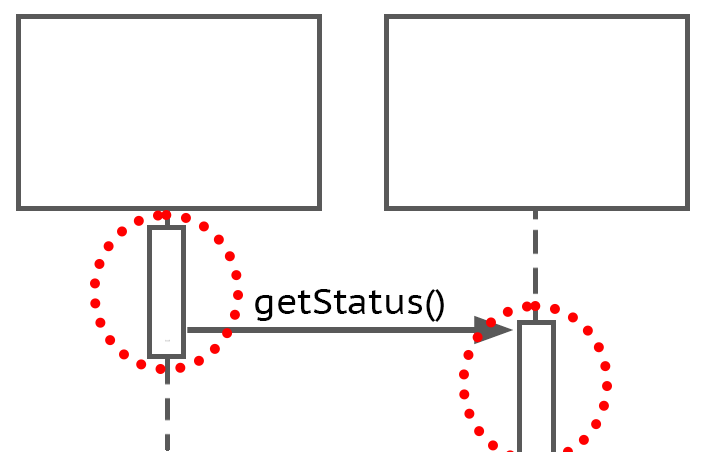
<style>
.page{position:relative;width:706px;height:452px;background:#ffffff}
.page>*{position:absolute;margin:0}
.t1{font:36px "PTSans-Caption";color:#000000}
</style>
<div class="page">
<p class="t1" style="left:255px;top:289px;width:189px;height:33px">getStatus()</p>
</div>
